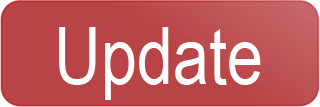
<style>
.page{position:relative;width:320px;height:107px;background:#b84447}
.page>*{position:absolute;margin:0}
.t1{font:79.2px "ArialNarrow";color:#ffffff}
</style>
<div class="page">
<p class="t1" style="left:59px;top:27px;width:202px;height:73px">Update</p>
</div>
